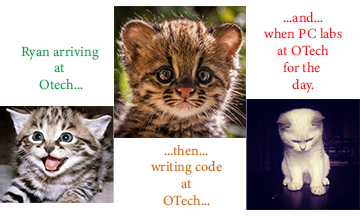
<style>
.page{position:relative;width:360px;height:216px;background:#ffffff}
.page>*{position:absolute;margin:0}
.t1{font:14px "MinionVariableConcept-Roman";color:#ed1c24}
.t2{font:14px "MinionVariableConcept-Roman";color:#00a651}
.t3{font:14px "MinionVariableConcept-Roman";color:#c9710a}
</style>
<div class="page">
<p class="t1" style="left:264px;top:11px;width:78px;height:82px;text-align:center">...and...<br>when PC labs<br>at OTech<br>for the <br>day.</p>
<p class="t2" style="left:21px;top:46px;width:78px;height:44px;text-align:center">Ryan arriving <br>at <br>Otech...</p>
<p class="t3" style="left:151px;top:144px;width:71px;height:62px;text-align:center">...then...<br>writing code<br>at<br>OTech...</p>
</div>
